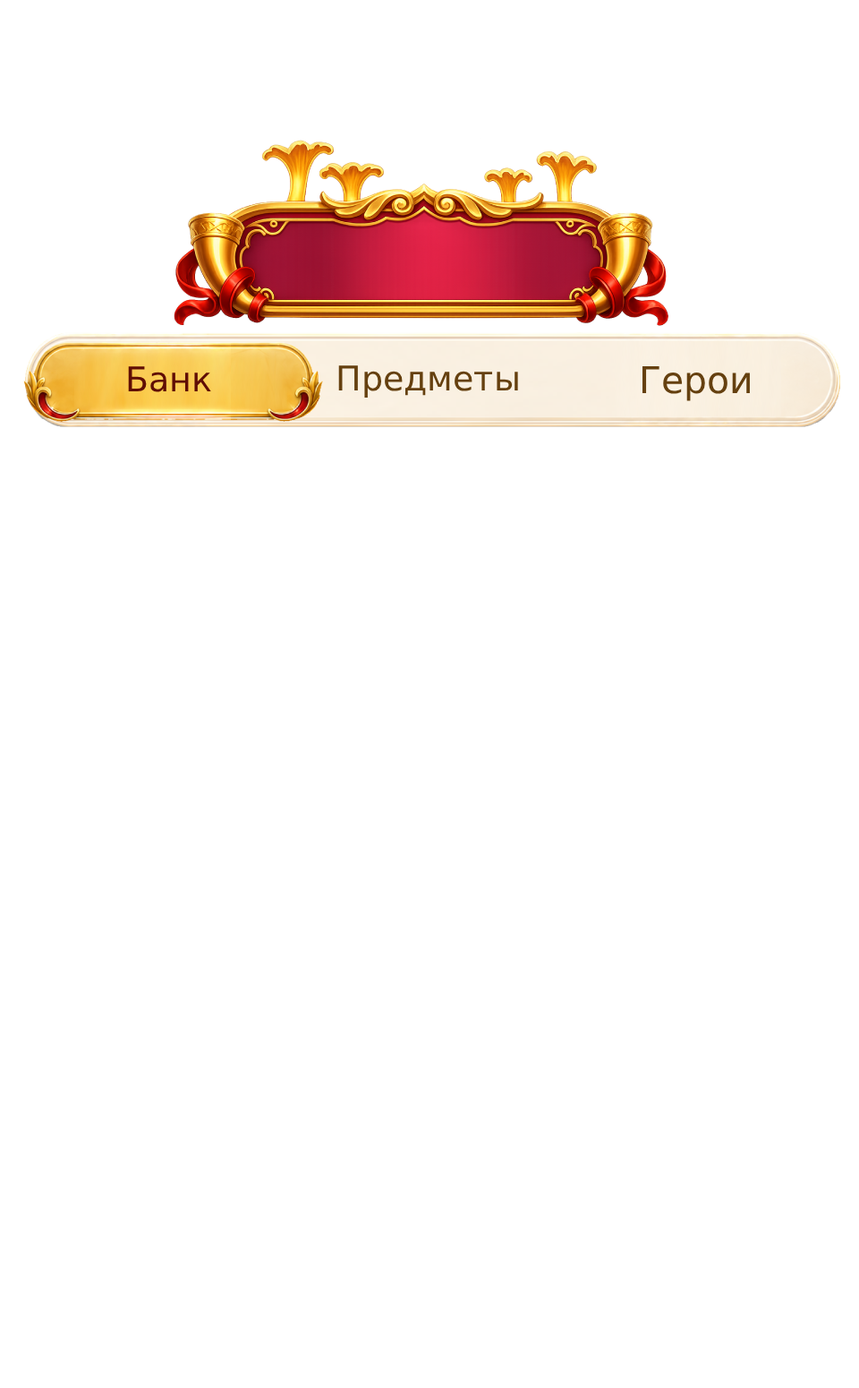
<style>
.page{position:relative;width:859px;height:1388px;background:#ffffff}
.page>*{position:absolute;margin:0}
.t1{font:34px "DejaVuSans";color:#65400f}
.t2{font:34px "DejaVuSans";color:#600e05}
.t3{font:36.7px "DejaVuSans";color:#65400f}
</style>
<div class="page">
<p class="t1" style="left:338px;top:365px;width:180px;height:32px">Предметы</p>
<p class="t2" style="left:128px;top:366px;width:83px;height:26px">Банк</p>
<p class="t3" style="left:643px;top:366px;width:107px;height:35px">Герои</p>
</div>
